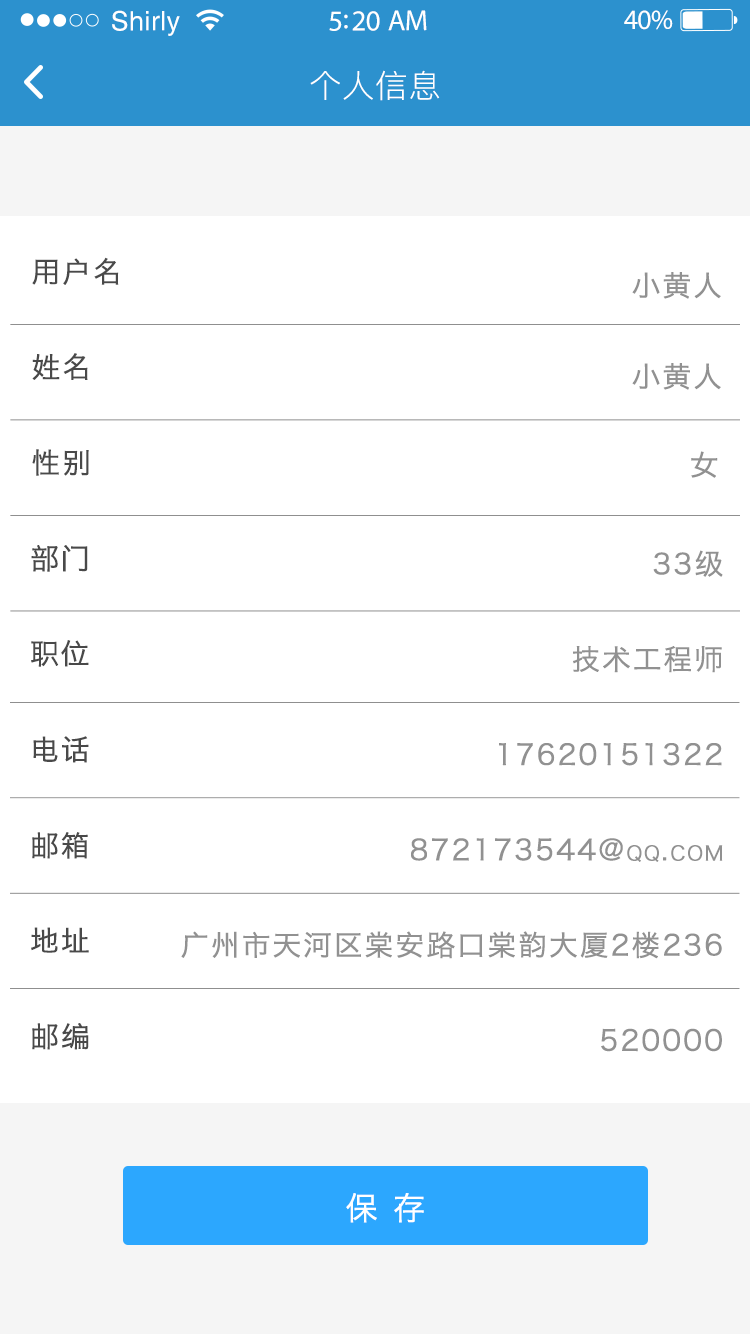
<style>
.page{position:relative;width:750px;height:1334px;background:#ffffff}
.page>*{position:absolute;margin:0}
.t1{font:26.8px "Helvetica";letter-spacing:0.02em;color:#ffffff}
.t2{font:29.1px "MyriadPro-Regular";letter-spacing:-0.02em;color:#ffffff}
.t3{font:27.9px "MyriadPro-Regular";letter-spacing:-0.02em;color:#ffffff}
.t4{font:32px "PingFang-SC-Regular";letter-spacing:0.03em;color:#ffffff}
.t5{font:28.5px "HiraginoSansGB-W3";letter-spacing:0.05em;color:#494949;font-variant:small-caps;font-weight:bold}
.t6{font:28.5px "HiraginoSansGB-W3";letter-spacing:0.05em;color:#919191;font-variant:small-caps;font-weight:bold}
.t7{font:28.5px/47.6px "HiraginoSansGB-W3";letter-spacing:0.05em;color:#919191;font-variant:small-caps;font-weight:bold}
.t8{font:32px "HiraginoSansGB-W3";letter-spacing:0.05em;color:#ffffff;font-variant:small-caps;font-weight:bold}
</style>
<div class="page">
<p class="t1" style="left:112px;top:10px;width:68px;height:26px">Shirly</p>
<p class="t2" style="left:329px;top:10px;width:98px;height:21px">5:20 AM</p>
<p class="t3" style="left:624px;top:10px;width:49px;height:20px">40%</p>
<p class="t4" style="left:310px;top:70px;width:130px;height:31px">个人信息</p>
<p class="t5" style="left:32px;top:257px;width:87px;height:28px">用户名</p>
<p class="t6" style="left:632px;top:272px;width:89px;height:27px">小黄人</p>
<p class="t5" style="left:32px;top:353px;width:56px;height:27px">姓名</p>
<p class="t6" style="left:632px;top:363px;width:89px;height:27px">小黄人</p>
<p class="t5" style="left:32px;top:449px;width:57px;height:27px">性别</p>
<p class="t6" style="left:691px;top:451px;width:27px;height:27px">女</p>
<p class="t5" style="left:31px;top:545px;width:57px;height:27px">部门</p>
<p class="t7" style="left:181px;top:550px;width:542px;height:502px;text-align:right">33级<br><br>技术工程师<br><br>17620151322<br><br>872173544@qq.com<br><br>广州市天河区棠安路口棠韵大厦2楼236<br><br>520000</p>
<p class="t5" style="left:31px;top:640px;width:58px;height:27px">职位</p>
<p class="t5" style="left:33px;top:736px;width:56px;height:27px">电话</p>
<p class="t5" style="left:32px;top:832px;width:56px;height:27px">邮箱</p>
<p class="t5" style="left:31px;top:927px;width:58px;height:26px">地址</p>
<p class="t5" style="left:32px;top:1023px;width:57px;height:27px">邮编</p>
<p class="t8" style="left:346px;top:1193px;width:78px;height:30px">保 存</p>
</div>
